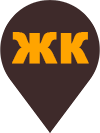
<style>
.page{position:relative;width:100px;height:133px;background:#3e2a2a}
.page>*{position:absolute;margin:0}
.t1{font:41.6px "Arial-Black";color:#ffa400;font-weight:bold}
</style>
<div class="page">
<p class="t1" style="left:12px;top:32px;width:77px;height:32px">ЖК</p>
</div>
